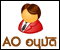
<style>
.page{position:relative;width:60px;height:50px;background:#ffffff}
.page>*{position:absolute;margin:0}
.t1{font:17px "PSLxKittithada-Bold";color:#88470e;font-weight:bold}
</style>
<div class="page">
<p class="t1" style="left:2px;top:36px;width:55px;height:13px">AO อนุมัติ</p>
</div>
